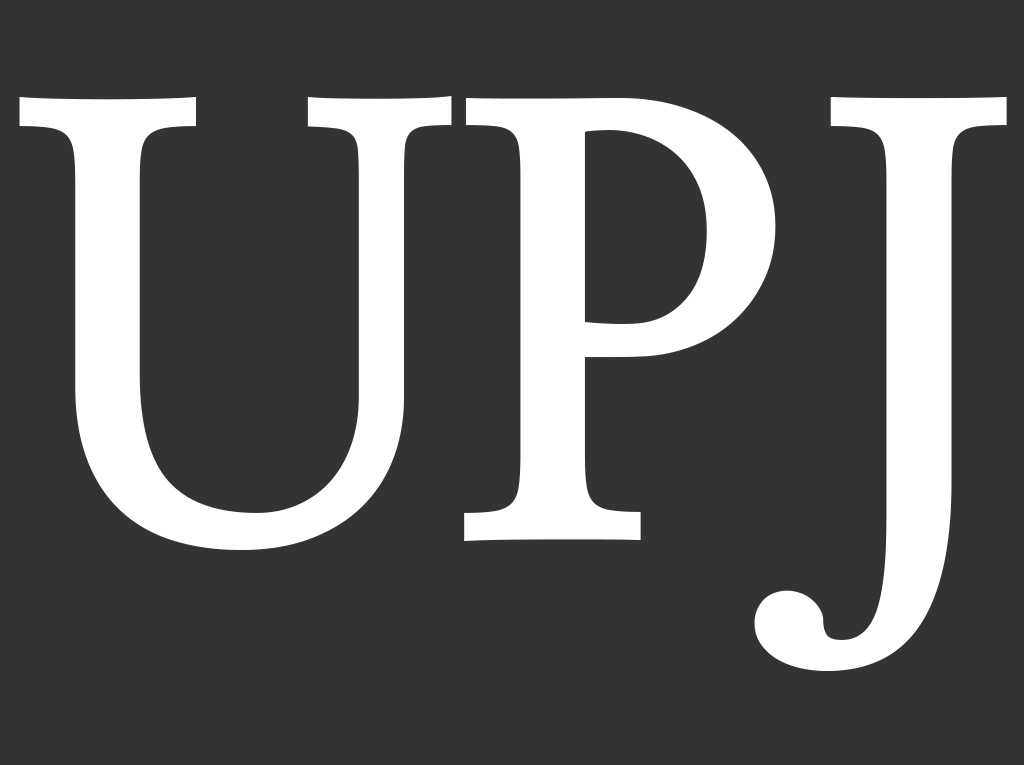
<style>
.page{position:relative;width:1024px;height:765px;background:#333333}
.page>*{position:absolute;margin:0}
.t1{font:600px "NanumMyeongjoExtraBold";color:#ffffff}
</style>
<div class="page">
<p class="t1" style="left:19px;top:96px;width:988px;height:575px">UPJ</p>
</div>
